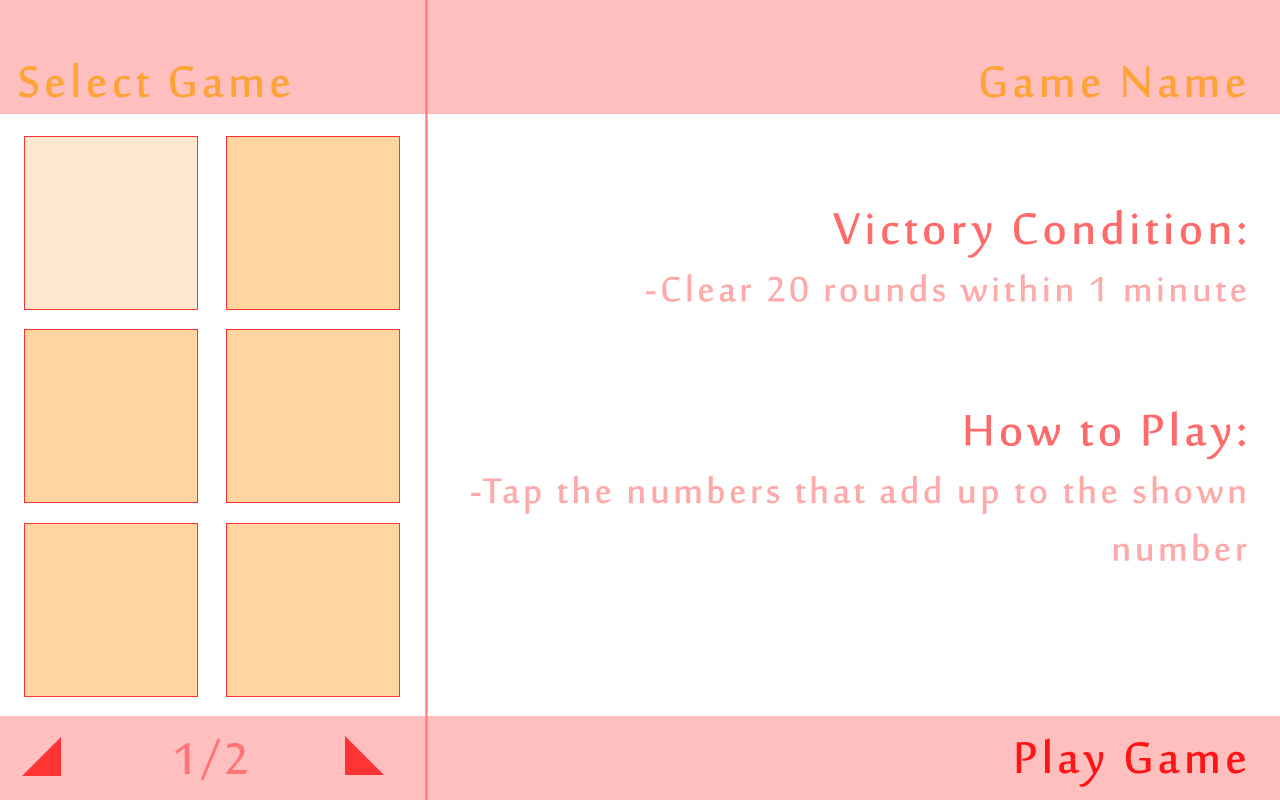
<style>
.page{position:relative;width:1280px;height:800px;background:#ffffff}
.page>*{position:absolute;margin:0}
.t1{font:60px "SakkalMajalla";letter-spacing:0.05em;color:#ffa238;font-weight:bold}
.t2{font:48px "SakkalMajalla";letter-spacing:0.05em;color:#ffaaaa;font-weight:bold}
.t3{font:60px "SakkalMajalla";letter-spacing:0.05em;color:#ff6a6a;font-weight:bold}
.t4{font:60px "SakkalMajalla";letter-spacing:0.05em;color:#ff7575;font-weight:bold}
.t5{font:60px "SakkalMajalla";letter-spacing:0.05em;color:#ff1515;font-weight:bold}
</style>
<div class="page">
<p class="t1" style="left:19px;top:62px;width:271px;height:36px">Select Game</p>
<p class="t1" style="left:980px;top:66px;width:265px;height:32px">Game Name</p>
<p class="t2" style="left:471px;top:209px;width:776px;height:352px;text-align:right"><span class="t3">Victory Condition:<br></span>-Clear 20 rounds within 1 minute<br><br><span class="t3">How to Play:<br></span>-Tap the numbers that add up to the shown number</p>
<p class="t4" style="left:175px;top:738px;width:72px;height:43px">1/2</p>
<p class="t5" style="left:1016px;top:738px;width:230px;height:49px">Play Game</p>
</div>
